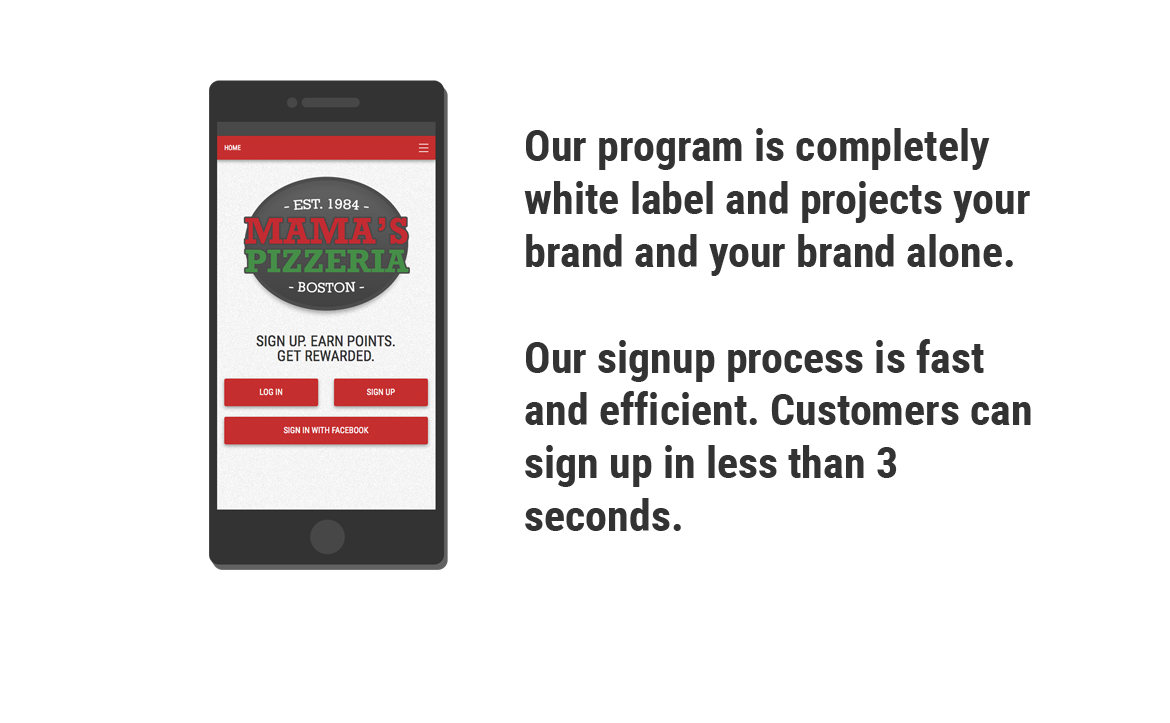
<style>
.page{position:relative;width:1170px;height:723px;background:#ffffff}
.page>*{position:absolute;margin:0}
.t1{font:44px "RobotoCondensed-Bold";color:#333333}
</style>
<div class="page">
<p class="t1" style="left:524px;top:128px;width:507px;height:403px">Our program is completely white label and projects your brand and your brand alone. <br><br>Our signup process is fast and efficient. Customers can sign up in less than 3 seconds.</p>
</div>
